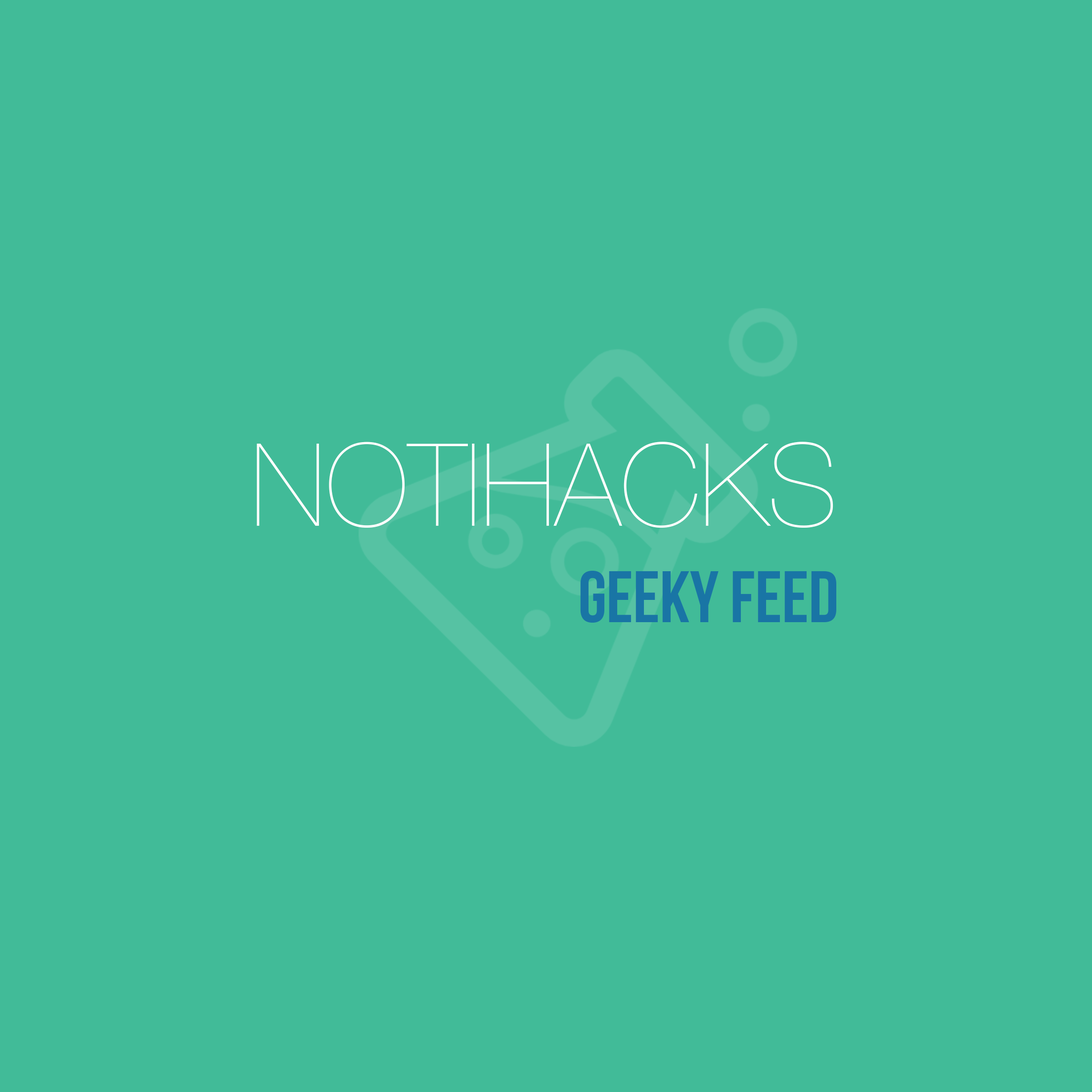
<style>
.page{position:relative;width:1092px;height:1092px;background:#41bb98}
.page>*{position:absolute;margin:0}
.t1{font:115px "HelveticaNeue-UltraLight";color:#ffffff}
.t2{font:72.8px "BebasNeue";color:#1975a5}
</style>
<div class="page">
<p class="t1" style="left:257px;top:442px;width:576px;height:86px">NOTIHACKS</p>
<p class="t2" style="left:580px;top:570px;width:256px;height:53px">geeky feed</p>
</div>
